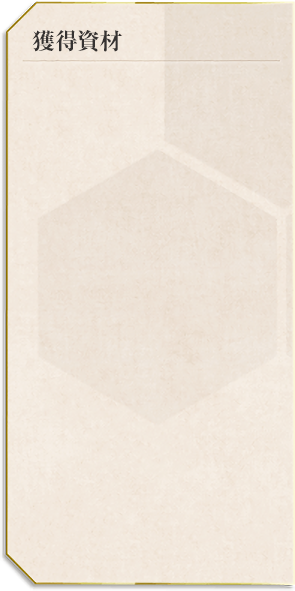
<style>
.page{position:relative;width:295px;height:591px}
.page>*{position:absolute;margin:0}
.t1{font:23px "RyuminPro-ExBold";color:#353231}
</style>
<div class="page">
<p class="t1" style="left:32px;top:30px;width:90px;height:22px">獲得資材</p>
</div>
